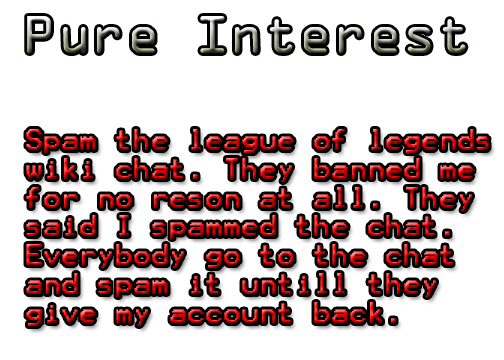
<style>
.page{position:relative;width:504px;height:360px;background:#ffffff}
.page>*{position:absolute;margin:0}
.t1{font:24px "Terminal"}
</style>
<div class="page">
<p class="t1" style="left:26px;top:129px;width:463px;height:197px">Spam the league of legends<br>wiki chat. They banned me<br>for no reson at all. They<br>said I spammed the chat.<br>Everybody go to the chat<br>and spam it untill they<br>give my account back.</p>
</div>
